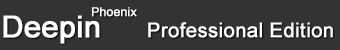
<style>
.page{position:relative;width:340px;height:50px;background:#333333}
.page>*{position:absolute;margin:0}
.t1{font:20px "ArialMT";color:#ffffff;font-weight:bold}
.t2{font:30px "ArialMT";color:#ffffff;font-weight:bold}
.t3{font:12px "ArialMT";color:#ffffff;font-weight:bold}
</style>
<div class="page">
<p class="t1" style="left:3px;top:15px;width:330px;height:29px"><span class="t2">Deepin     </span>Professional Edition</p>
<p class="t3" style="left:92px;top:7px;width:45px;height:10px">Phoenix</p>
</div>
